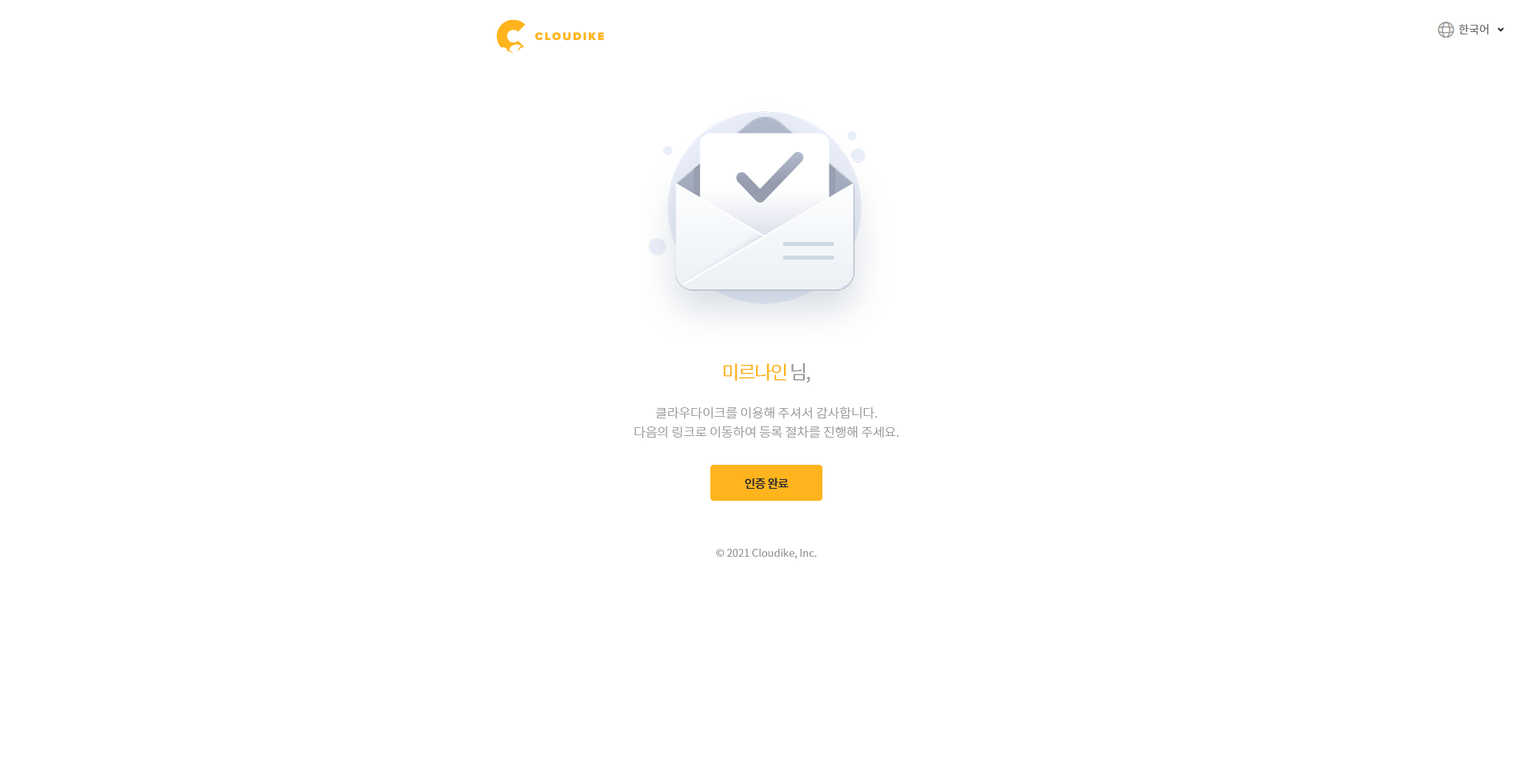
<style>
.page{position:relative;width:1536px;height:776px;background:#ffffff}
.page>*{position:absolute;margin:0}
.t1{font:11.2px "NotoSansCJKkr-DemiLight";color:#666666}
.t2{font:19.2px "NotoSansCJKkr-DemiLight";letter-spacing:-0.075em;color:#ffb41d}
.t3{font:19.2px "NotoSansCJKkr-DemiLight";letter-spacing:-0.075em;color:#999999}
.t4{font:12.8px/19.2px "NotoSansCJKkr-Light";letter-spacing:-0.005em;color:#999999}
.t5{font:12px "NotoSansCJKkr-Medium";letter-spacing:-0.05em;color:#2d2d2d}
.t6{font:10.4px "NotoSansCJKkr-DemiLight";color:#999999}
</style>
<div class="page">
<p class="t1" style="left:1459px;top:24px;width:30px;height:11px">한국어</p>
<p class="t2" style="left:723px;top:363px;width:88px;height:20px">미르나인 <span class="t3">님,</span></p>
<p class="t4" style="left:635px;top:406px;width:264px;height:32px;text-align:center">클라우다이크를 이용해 주셔서 감사합니다.<br>다음의 링크로 이동하여 등록 절차를 진행해 주세요.</p>
<p class="t5" style="left:745px;top:478px;width:44px;height:12px">인증 완료</p>
<p class="t6" style="left:716px;top:548px;width:101px;height:11px">© 2021 Cloudike, Inc.</p>
</div>
